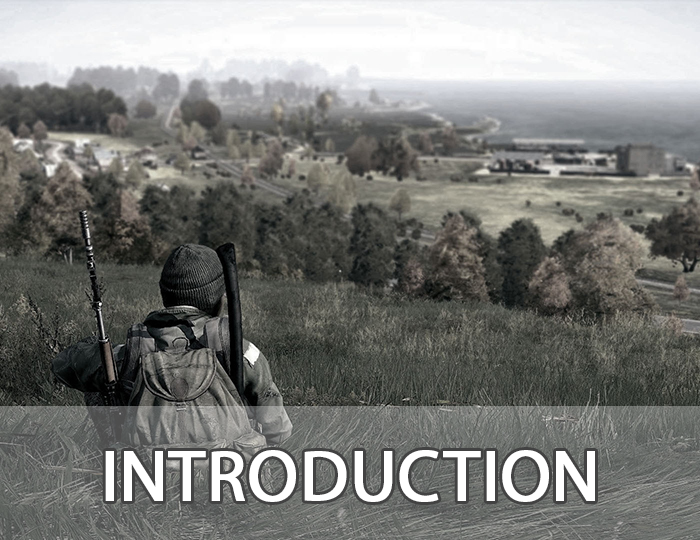
<style>
.page{position:relative;width:700px;height:540px}
.page>*{position:absolute;margin:0}
.t1{font:72px "MyriadPro-Regular";color:#ffffff;font-weight:bold}
</style>
<div class="page">
<p class="t1" style="left:105px;top:450px;width:490px;height:52px">INTRODUCTION</p>
</div>
